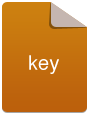
<style>
.page{position:relative;width:88px;height:113px}
.page>*{position:absolute;margin:0}
.t1{font:20px "Helvetica";color:#ffffff}
</style>
<div class="page">
<p class="t1" style="left:29px;top:55px;width:30px;height:19px">key</p>
</div>
